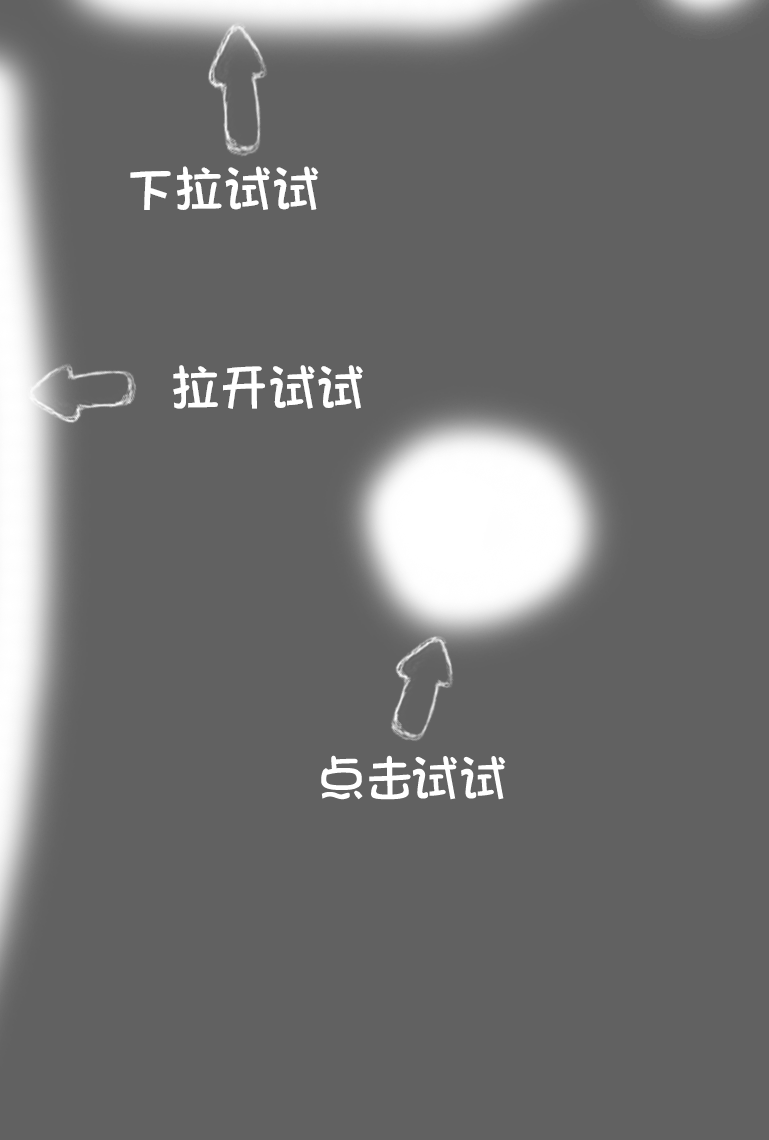
<style>
.page{position:relative;width:769px;height:1140px;background:#616161}
.page>*{position:absolute;margin:0}
.t1{font:47px "STHeitiSC-Light";color:#ffffff}
</style>
<div class="page">
<p class="t1" style="left:130px;top:166px;width:189px;height:44px">下拉试试</p>
<p class="t1" style="left:173px;top:365px;width:190px;height:44px">拉开试试</p>
</div>
